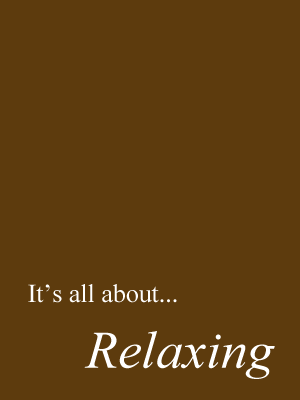
<style>
.page{position:relative;width:300px;height:400px;background:#5d3b0d}
.page>*{position:absolute;margin:0}
.t1{font:25.9px "TimesNewRomanPSMT";color:#ffffff}
.t2{font:52.8px "TimesNewRomanPS-ItalicMT";color:#ffffff}
</style>
<div class="page">
<p class="t1" style="left:28px;top:284px;width:149px;height:19px">It’s all about...</p>
<p class="t2" style="left:84px;top:331px;width:191px;height:48px">Relaxing</p>
</div>
